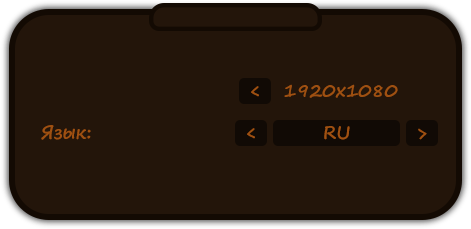
<style>
.page{position:relative;width:471px;height:229px;background:#23150a}
.page>*{position:absolute;margin:0}
.t1{font:18px "SegoePrint-Bold";color:#9f5011}
</style>
<div class="page">
<p class="t1" style="left:251px;top:86px;width:8px;height:11px">&lt;</p>
<p class="t1" style="left:284px;top:84px;width:114px;height:14px">1920x1080</p>
<p class="t1" style="left:41px;top:125px;width:50px;height:15px">Язык:</p>
<p class="t1" style="left:324px;top:126px;width:26px;height:14px">RU</p>
<p class="t1" style="left:247px;top:128px;width:8px;height:11px">&lt;</p>
<p class="t1" style="left:418px;top:128px;width:9px;height:12px">&gt;</p>
</div>
